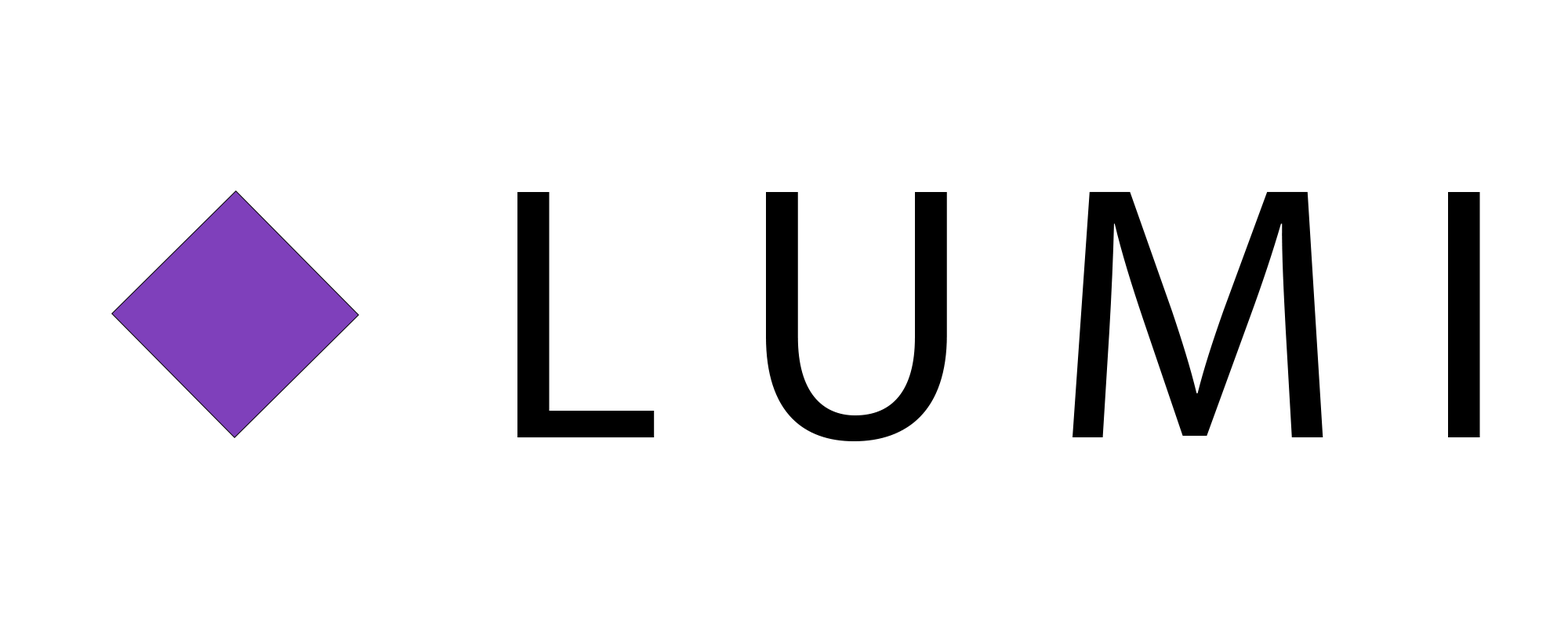
<style>
.page{position:relative;width:1568px;height:627px;background:#ffffff}
.page>*{position:absolute;margin:0}
.t1{font:363.9px "MyriadPro-Regular";color:#000000}
</style>
<div class="page">
<p class="t1" style="left:517px;top:191px;width:963px;height:250px">L U M I</p>
</div>
